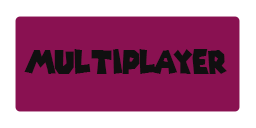
<style>
.page{position:relative;width:256px;height:128px;background:#891151}
.page>*{position:absolute;margin:0}
.t1{font:32.7px "SuperMarioGalaxy";color:#101010;scale:0.82 1}
</style>
<div class="page">
<p class="t1" style="left:24px;top:49px;width:203px;height:25px">MULTIPLAYER</p>
</div>
